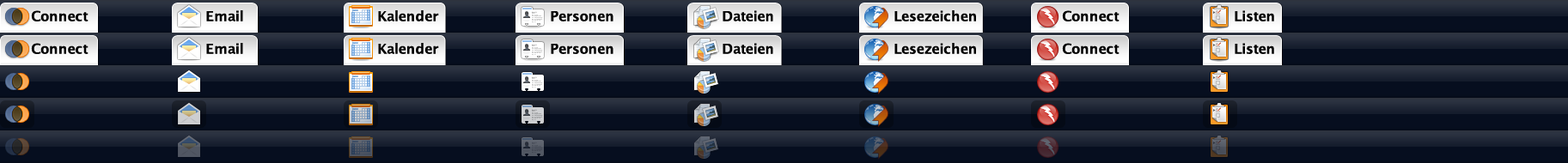
<style>
.page{position:relative;width:1568px;height:163px;background:#060e1f}
.page>*{position:absolute;margin:0}
.t1{font:13.7px "LucidaGrande-Bold";letter-spacing:-0.01em;color:#000000}
</style>
<div class="page">
<p class="t1" style="left:31px;top:10px;width:57px;height:11px">Connect</p>
<p class="t1" style="left:206px;top:10px;width:37px;height:11px">Email</p>
<p class="t1" style="left:378px;top:10px;width:61px;height:11px">Kalender</p>
<p class="t1" style="left:551px;top:11px;width:62px;height:10px">Personen</p>
<p class="t1" style="left:723px;top:10px;width:50px;height:11px">Dateien</p>
<p class="t1" style="left:894px;top:10px;width:82px;height:11px">Lesezeichen</p>
<p class="t1" style="left:1062px;top:10px;width:58px;height:11px">Connect</p>
<p class="t1" style="left:1235px;top:10px;width:39px;height:11px">Listen</p>
<p class="t1" style="left:31px;top:43px;width:57px;height:11px">Connect</p>
<p class="t1" style="left:206px;top:43px;width:37px;height:11px">Email</p>
<p class="t1" style="left:378px;top:43px;width:61px;height:11px">Kalender</p>
<p class="t1" style="left:551px;top:44px;width:62px;height:10px">Personen</p>
<p class="t1" style="left:723px;top:43px;width:50px;height:11px">Dateien</p>
<p class="t1" style="left:894px;top:43px;width:82px;height:11px">Lesezeichen</p>
<p class="t1" style="left:1062px;top:43px;width:58px;height:11px">Connect</p>
<p class="t1" style="left:1235px;top:43px;width:39px;height:11px">Listen</p>
</div>
